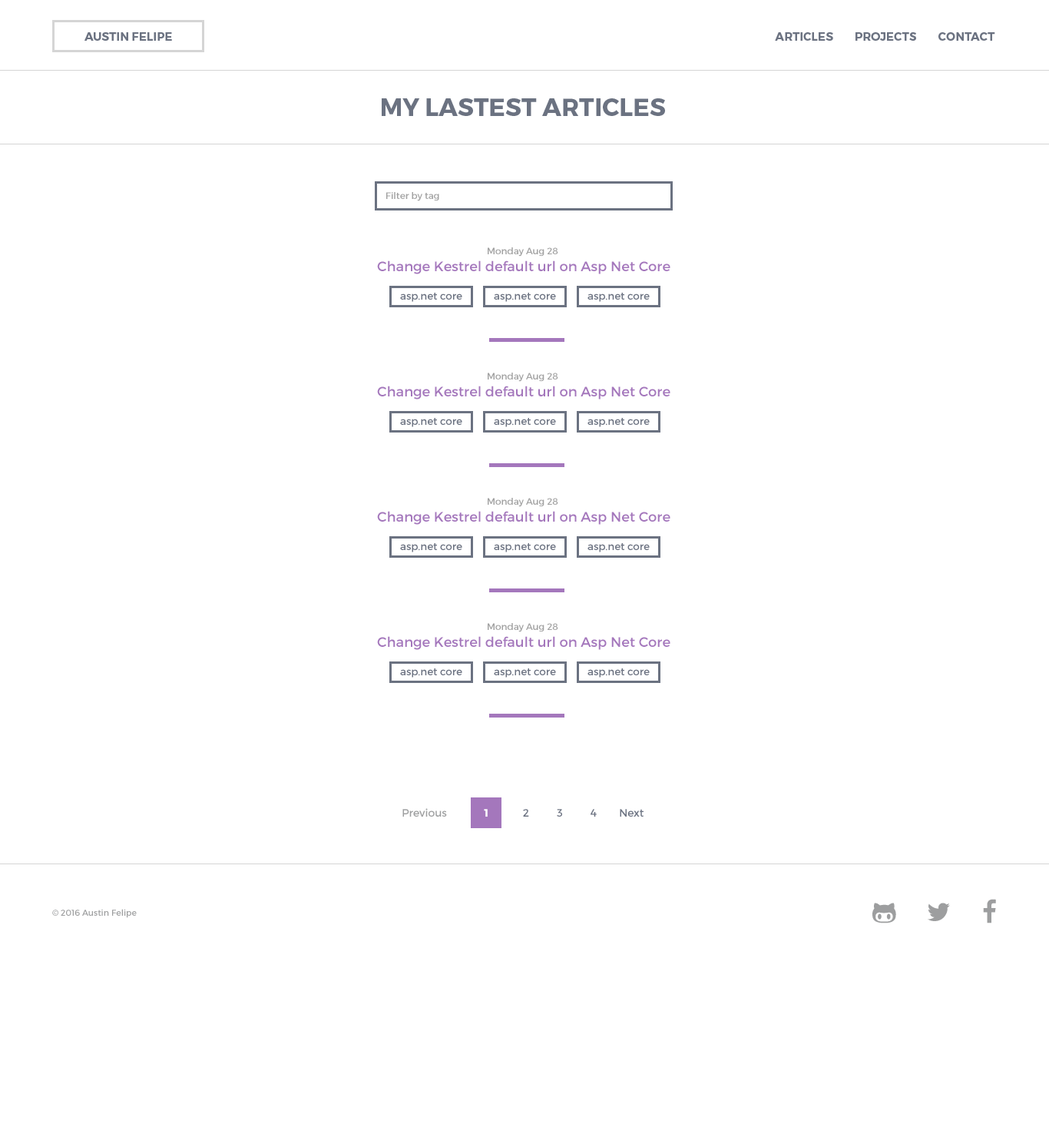
<style>
.page{position:relative;width:1049px;height:1137px;background:#ffffff}
.page>*{position:absolute;margin:0}
.t1{font:11.6px "Montserrat-Bold";color:#6b7281;text-transform:uppercase}
.t2{font:24.7px "Montserrat-Bold";color:#6b7281;text-transform:uppercase}
.t3{font:9.2px "Montserrat-Regular";color:#a1a1a1}
.t4{font:13.8px "Montserrat-Regular";color:#a477bc}
.t5{font:10.3px "Montserrat-Regular";color:#6b7281}
.t6{font:10.8px "Montserrat-Regular";color:#9d9e9f}
.t7{font:10.8px "Montserrat-Bold";color:#ffffff}
.t8{font:10.8px "Montserrat-Regular";color:#6b7281}
.t9{font:8.4px "Montserrat-Regular";color:#9d9e9f}
</style>
<div class="page">
<p class="t1" style="left:84px;top:32px;width:88px;height:9px">Austin Felipe</p>
<p class="t1" style="left:775px;top:32px;width:220px;height:9px">Articles        projects        Contact</p>
<p class="t2" style="left:382px;top:98px;width:283px;height:18px">My lastest articles</p>
<p class="t3" style="left:386px;top:192px;width:53px;height:9px">Filter by tag</p>
<p class="t3" style="left:488px;top:247px;width:70px;height:10px">Monday Aug 28</p>
<p class="t4" style="left:377px;top:260px;width:293px;height:14px">Change Kestrel default url on Asp Net Core</p>
<p class="t5" style="left:400px;top:293px;width:62px;height:9px">asp.net core</p>
<p class="t5" style="left:494px;top:293px;width:62px;height:9px">asp.net core</p>
<p class="t5" style="left:588px;top:293px;width:62px;height:9px">asp.net core</p>
<p class="t3" style="left:488px;top:372px;width:70px;height:10px">Monday Aug 28</p>
<p class="t4" style="left:377px;top:386px;width:293px;height:13px">Change Kestrel default url on Asp Net Core</p>
<p class="t5" style="left:400px;top:418px;width:62px;height:9px">asp.net core</p>
<p class="t5" style="left:494px;top:418px;width:62px;height:9px">asp.net core</p>
<p class="t5" style="left:588px;top:418px;width:62px;height:9px">asp.net core</p>
<p class="t3" style="left:488px;top:498px;width:70px;height:9px">Monday Aug 28</p>
<p class="t4" style="left:377px;top:511px;width:293px;height:14px">Change Kestrel default url on Asp Net Core</p>
<p class="t5" style="left:400px;top:543px;width:62px;height:9px">asp.net core</p>
<p class="t5" style="left:494px;top:543px;width:62px;height:9px">asp.net core</p>
<p class="t5" style="left:588px;top:543px;width:62px;height:9px">asp.net core</p>
<p class="t3" style="left:488px;top:623px;width:70px;height:9px">Monday Aug 28</p>
<p class="t4" style="left:377px;top:636px;width:293px;height:14px">Change Kestrel default url on Asp Net Core</p>
<p class="t5" style="left:400px;top:668px;width:62px;height:9px">asp.net core</p>
<p class="t5" style="left:494px;top:668px;width:62px;height:9px">asp.net core</p>
<p class="t5" style="left:588px;top:668px;width:62px;height:9px">asp.net core</p>
<p class="t6" style="left:402px;top:808px;width:45px;height:8px">Previous</p>
<p class="t7" style="left:484px;top:809px;width:4px;height:7px">1</p>
<p class="t8" style="left:523px;top:809px;width:121px;height:7px">2          3          4        Next</p>
<p class="t9" style="left:52px;top:909px;width:85px;height:9px">© 2016 Austin Felipe</p>
</div>
